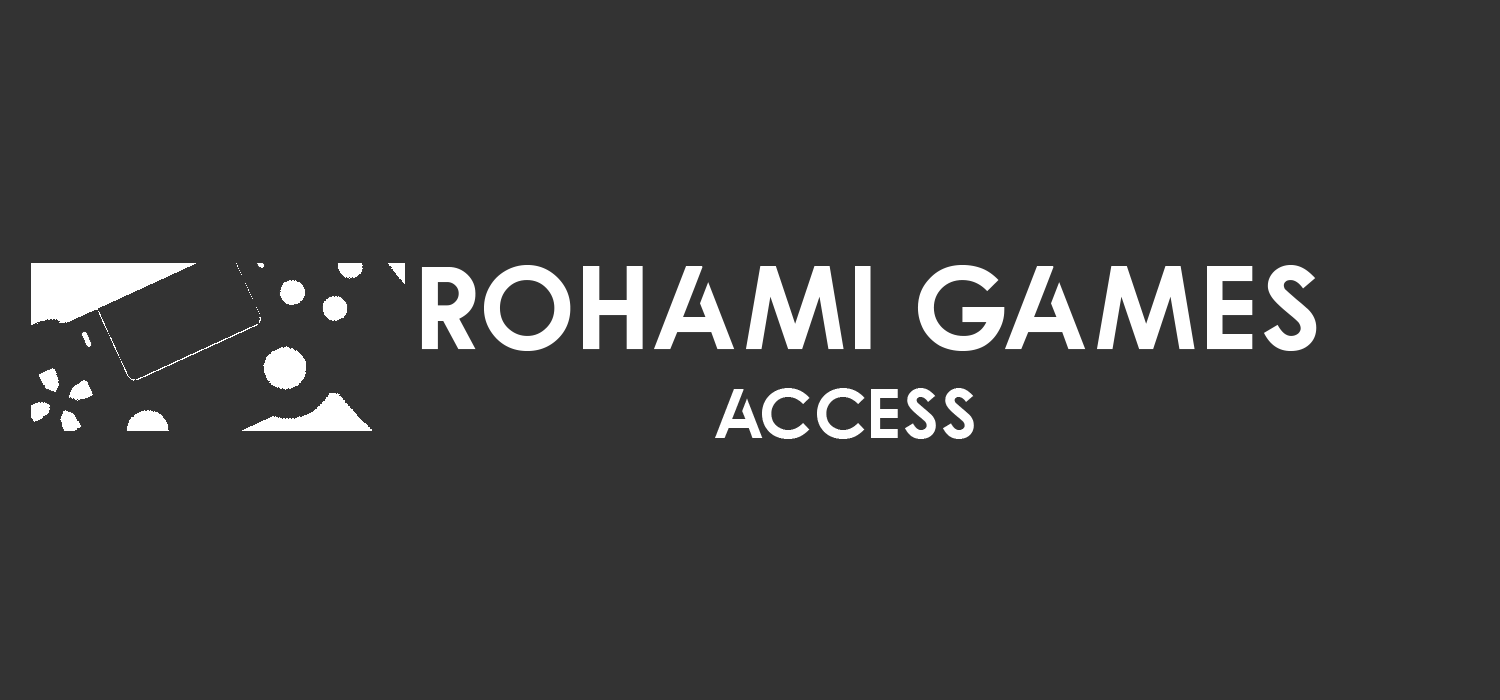
<style>
.page{position:relative;width:1500px;height:700px;background:#333333}
.page>*{position:absolute;margin:0}
.t1{font:120.6px "Qualy-Bold";color:#ffffff}
.t2{font:71.8px "Qualy-Bold";color:#ffffff}
</style>
<div class="page">
<p class="t1" style="left:421px;top:265px;width:896px;height:86px">ROHAMI GAMES</p>
<p class="t2" style="left:715px;top:388px;width:259px;height:51px">access</p>
</div>
